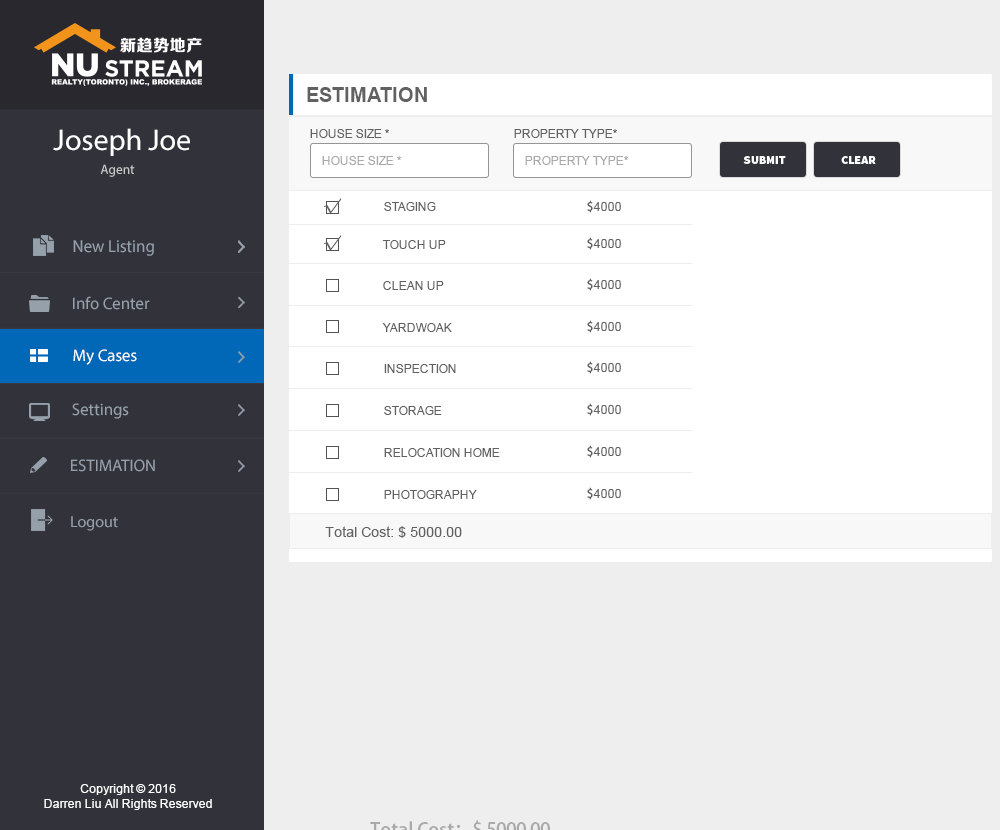
<style>
.page{position:relative;width:1000px;height:830px;background:#ffffff}
.page>*{position:absolute;margin:0}
.t1{font:20px "Arial-BoldMT";color:#616161}
.t2{font:30px "MyriadPro-Regular";color:#ffffff}
.t3{font:12px "ArialMT";color:#616161}
.t4{font:12px "ArialMT";color:#a9a9a9}
.t5{font:12px "SourceSansPro-Black";color:#ffffff}
.t6{font:13.4px "MyriadPro-Regular";color:#cccccc}
.t7{font:18px "MyriadPro-Regular";color:#616161}
.t8{font:12px "AdobeHeitiStd-Regular";color:#616161}
.t9{font:17.6px "MyriadPro-Regular";color:#95a0aa;scale:0.96 1}
.t10{font:16.8px "MyriadPro-Regular";color:#95a0aa}
.t11{font:16.8px "MyriadPro-Regular";color:#ffffff}
.t12{font:16px "MyriadPro-Regular";color:#95a0aa}
.t13{font:14px "ArialMT";color:#616161}
.t14{font:12px "ArialMT";color:#ffffff}
</style>
<div class="page">
<p class="t1" style="left:307px;top:87px;width:120px;height:15px">ESTIMATION</p>
<p class="t2" style="left:53px;top:128px;width:137px;height:28px">Joseph Joe</p>
<p class="t3" style="left:310px;top:129px;width:79px;height:9px">HOUSE SIZE *</p>
<p class="t3" style="left:514px;top:129px;width:103px;height:9px">PROPERTY TYPE*</p>
<p class="t4" style="left:322px;top:156px;width:79px;height:9px">HOUSE SIZE *</p>
<p class="t4" style="left:525px;top:156px;width:103px;height:9px">PROPERTY TYPE*</p>
<p class="t5" style="left:743px;top:156px;width:43px;height:8px">SUBMIT</p>
<p class="t5" style="left:841px;top:156px;width:35px;height:8px">CLEAR</p>
<p class="t6" style="left:100px;top:164px;width:35px;height:13px">Agent</p>
<p class="t7" style="left:324px;top:198px;width:17px;height:16px">√</p>
<p class="t3" style="left:384px;top:202px;width:52px;height:9px">STAGING</p>
<p class="t3" style="left:587px;top:200px;width:34px;height:13px"><span class="t8">$</span>4000</p>
<p class="t9" style="left:73px;top:240px;width:81px;height:16px">New Listing</p>
<p class="t7" style="left:324px;top:235px;width:17px;height:16px">√</p>
<p class="t3" style="left:382px;top:240px;width:64px;height:9px">TOUCH UP</p>
<p class="t3" style="left:587px;top:237px;width:34px;height:13px"><span class="t8">$</span>4000</p>
<p class="t3" style="left:383px;top:281px;width:61px;height:9px">CLEAN UP</p>
<p class="t3" style="left:587px;top:278px;width:34px;height:13px"><span class="t8">$</span>4000</p>
<p class="t10" style="left:73px;top:296px;width:77px;height:14px">Info Center</p>
<p class="t3" style="left:382px;top:323px;width:70px;height:9px">YARDWOAK</p>
<p class="t3" style="left:587px;top:320px;width:34px;height:13px"><span class="t8">$</span>4000</p>
<p class="t11" style="left:73px;top:349px;width:64px;height:16px">My Cases</p>
<p class="t3" style="left:384px;top:364px;width:72px;height:9px">INSPECTION</p>
<p class="t3" style="left:587px;top:361px;width:34px;height:13px"><span class="t8">$</span>4000</p>
<p class="t10" style="left:72px;top:403px;width:57px;height:16px">Settings</p>
<p class="t3" style="left:384px;top:406px;width:58px;height:9px">STORAGE</p>
<p class="t3" style="left:587px;top:403px;width:34px;height:13px"><span class="t8">$</span>4000</p>
<p class="t3" style="left:384px;top:448px;width:116px;height:9px">RELOCATION HOME</p>
<p class="t3" style="left:587px;top:445px;width:34px;height:13px"><span class="t8">$</span>4000</p>
<p class="t10" style="left:71px;top:459px;width:84px;height:13px">ESTIMATION</p>
<p class="t3" style="left:384px;top:490px;width:93px;height:9px">PHOTOGRAPHY</p>
<p class="t3" style="left:587px;top:487px;width:34px;height:13px"><span class="t8">$</span>4000</p>
<p class="t12" style="left:71px;top:516px;width:47px;height:15px">Logout</p>
<p class="t13" style="left:325px;top:526px;width:137px;height:12px">Total Cost: $ 5000.00</p>
<p class="t14" style="left:44px;top:784px;width:168px;height:26px;text-align:center">Copyright © 2016<br>Darren Liu All Rights Reserved</p>
</div>
